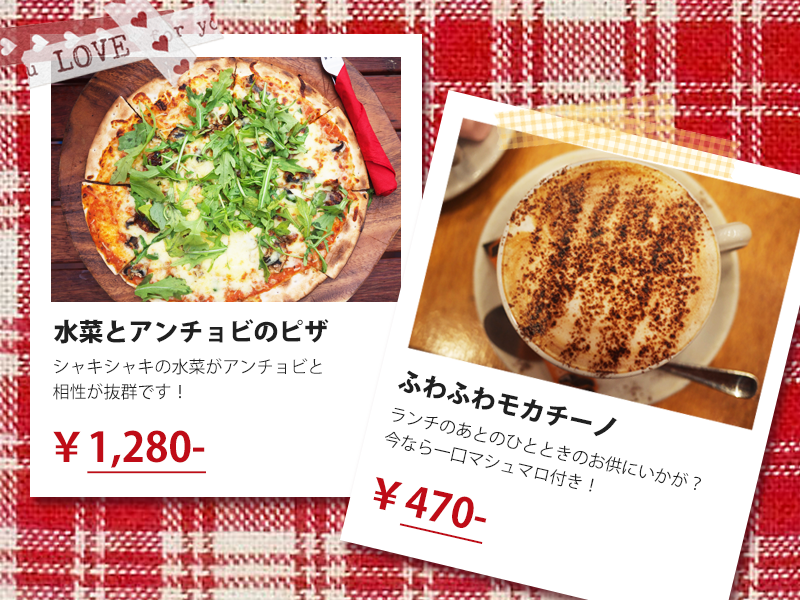
<style>
.page{position:relative;width:800px;height:600px;background:#ffffff}
.page>*{position:absolute;margin:0}
.t1{font:25px "KozGoPr6N-Heavy";color:#202020;text-transform:uppercase}
.t2{font:17px/25px "KozGoPr6N-Regular";color:#202020;text-transform:uppercase}
.t3{font:40.8px "KozGoPr6N-Bold";color:#bf0c17;text-transform:uppercase;text-decoration:underline}
.t4{font:40.8px "KozGoPr6N-Bold";color:#bf0c17;text-transform:uppercase}
</style>
<div class="page">
<p class="t1" style="left:54px;top:319px;width:275px;height:25px">水菜とアンチョビのピザ</p>
<p class="t2" style="left:53px;top:358px;width:269px;height:42px">シャキシャキの水菜がアンチョビと<br>相性が抜群です！</p>
<p class="t1" style="left:398px;top:370px;width:220px;height:67px;rotate:13deg">ふわふわモカチーノ</p>
<p class="t2" style="left:385px;top:407px;width:316px;height:85px;rotate:13deg">ランチのあとのひとときのお供にいかが？<br>今なら一口マシュマロ付き！</p>
<p class="t3" style="left:53px;top:430px;width:153px;height:44px"><span class="t4">￥</span>1,280-</p>
<p class="t3" style="left:373px;top:477px;width:114px;height:67px;rotate:13deg"><span class="t4">￥</span>470-</p>
</div>
